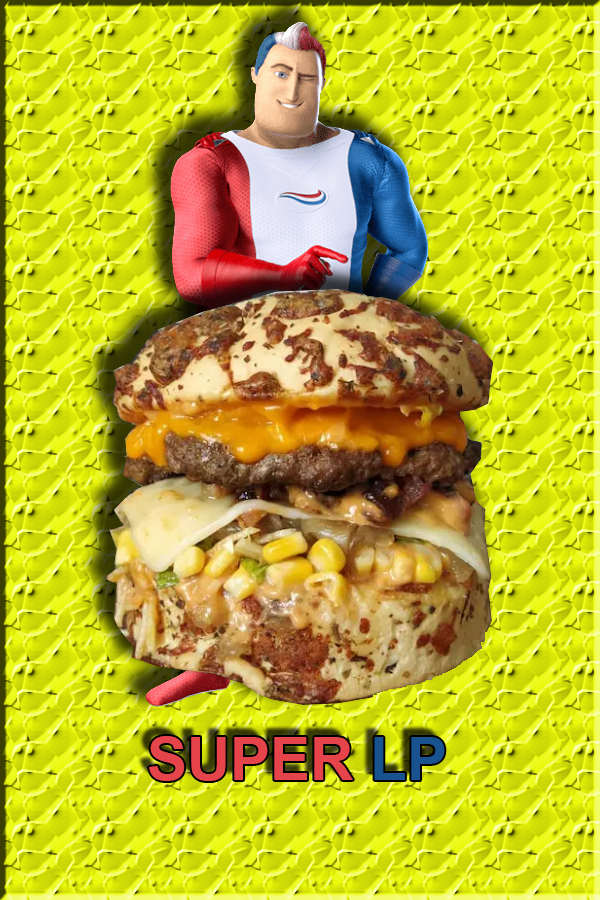
<style>
.page{position:relative;width:600px;height:900px}
.page>*{position:absolute;margin:0}
.t1{font:60px "Arial-BoldMT";color:#e5454a}
.t2{font:60px "Arial-BoldMT";color:#18538f}
</style>
<div class="page">
<p class="t1" style="left:149px;top:736px;width:296px;height:45px">SUPER <span class="t2">LP</span></p>
</div>
